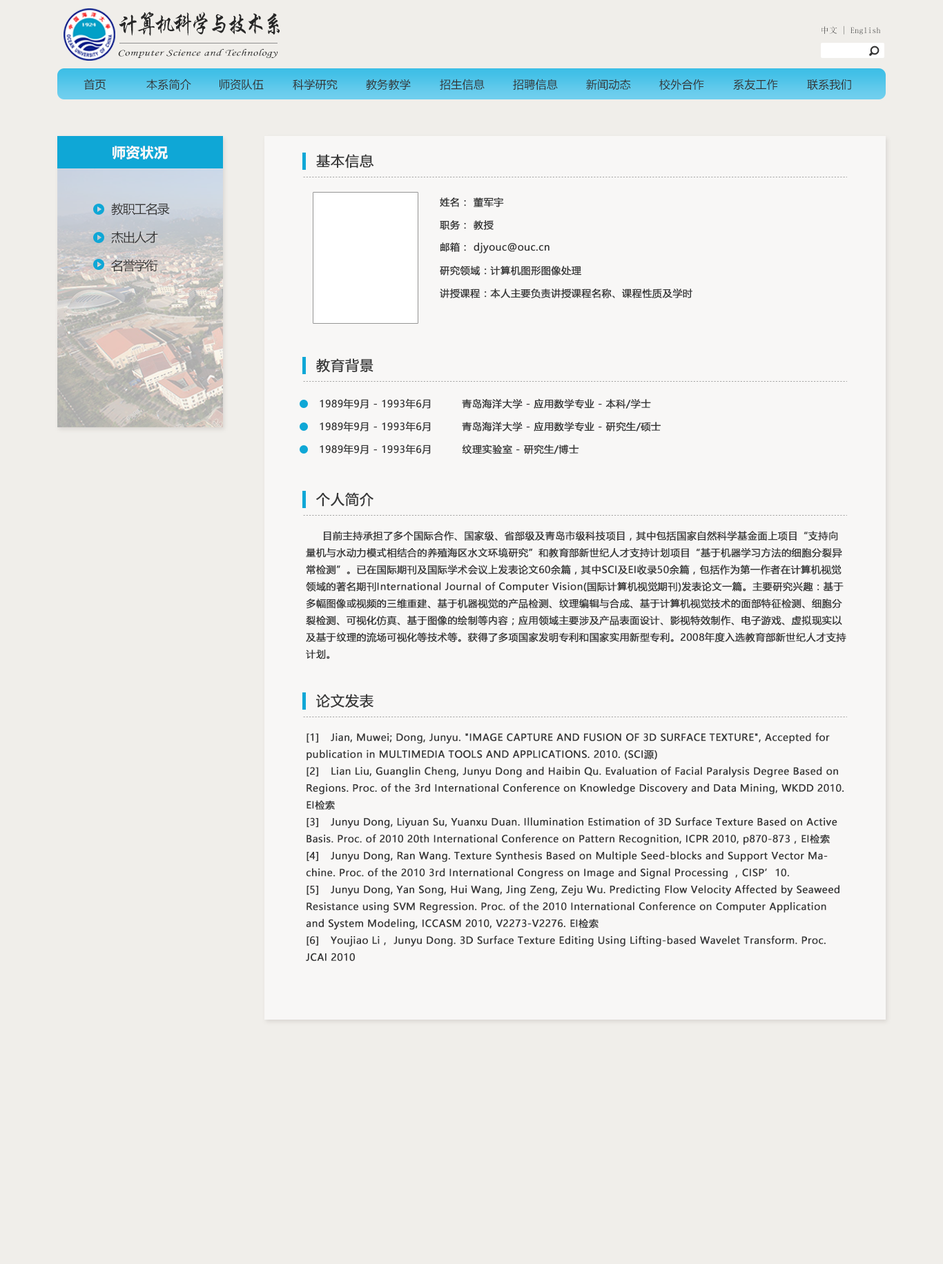
<style>
.page{position:relative;width:943px;height:1264px;background:#f0eeea}
.page>*{position:absolute;margin:0}
.t1{font:24.1px "STXingkai";letter-spacing:-0.14em;color:#272727;scale:0.88 1}
.t2{font:8.3px "SimSun";letter-spacing:0.02em}
.t3{font:9.5px "STLiti";letter-spacing:0.02em;color:#272727;scale:1.34 1}
.t4{font:11px "MicrosoftYaHei";letter-spacing:0.02em;color:#333333}
.t5{font:13.8px "MicrosoftYaHei-Bold";letter-spacing:0.02em;color:#f9f9f9}
.t6{font:13.8px "MicrosoftYaHei";letter-spacing:0.02em;color:#383838;font-weight:bold}
.t7{font:9.7px "MicrosoftYaHei";letter-spacing:0.02em;color:#383838;font-weight:bold}
.t8{font:12.4px "MicrosoftYaHei";letter-spacing:-0.076em;color:#383838}
</style>
<div class="page">
<p class="t1" style="left:119px;top:12px;width:161px;height:24px">计算机科学与技术系</p>
<p class="t2" style="left:822px;top:26px;width:59px;height:9px">中文 | English</p>
<p class="t3" style="left:118px;top:49px;width:160px;height:9px">Computer Science and Technology</p>
<p class="t4" style="left:84px;top:79px;width:22px;height:11px">首页</p>
<p class="t4" style="left:146px;top:79px;width:45px;height:11px">本系简介</p>
<p class="t4" style="left:220px;top:79px;width:44px;height:11px">师资队伍</p>
<p class="t4" style="left:293px;top:79px;width:45px;height:11px">科学研究</p>
<p class="t4" style="left:366px;top:79px;width:45px;height:11px">教务教学</p>
<p class="t4" style="left:440px;top:79px;width:45px;height:11px">招生信息</p>
<p class="t4" style="left:513px;top:79px;width:45px;height:11px">招聘信息</p>
<p class="t4" style="left:586px;top:79px;width:45px;height:11px">新闻动态</p>
<p class="t4" style="left:659px;top:79px;width:45px;height:11px">校外合作</p>
<p class="t4" style="left:733px;top:79px;width:45px;height:11px">系友工作</p>
<p class="t4" style="left:807px;top:79px;width:44px;height:11px">联系我们</p>
<p class="t5" style="left:113px;top:146px;width:55px;height:13px">师资状况</p>
<p class="t6" style="left:316px;top:154px;width:58px;height:14px">基本信息</p>
<p class="t7" style="left:440px;top:197px;width:64px;height:10px">姓名： 董军宇</p>
<p class="t8" style="left:111px;top:203px;width:59px;height:12px">教职工名录</p>
<p class="t7" style="left:440px;top:220px;width:54px;height:10px">职务： 教授</p>
<p class="t8" style="left:111px;top:231px;width:47px;height:13px">杰出人才</p>
<p class="t7" style="left:441px;top:242px;width:109px;height:11px">邮箱： djyouc@ouc.cn</p>
<p class="t8" style="left:111px;top:259px;width:47px;height:13px">名誉学衔</p>
<p class="t7" style="left:440px;top:266px;width:141px;height:9px">研究领域：计算机图形图像处理</p>
<p class="t7" style="left:440px;top:289px;width:253px;height:9px">讲授课程：本人主要负责讲授课程名称、课程性质及学时</p>
<p class="t6" style="left:316px;top:358px;width:58px;height:15px">教育背景</p>
<p class="t7" style="left:320px;top:398px;width:111px;height:11px">1989年9月 - 1993年6月</p>
<p class="t7" style="left:462px;top:398px;width:189px;height:11px">青岛海洋大学 - 应用数学专业 - 本科/学士</p>
<p class="t7" style="left:320px;top:421px;width:111px;height:11px">1989年9月 - 1993年6月</p>
<p class="t7" style="left:462px;top:421px;width:199px;height:11px">青岛海洋大学 - 应用数学专业 - 研究生/硕士</p>
<p class="t7" style="left:320px;top:444px;width:111px;height:10px">1989年9月 - 1993年6月</p>
<p class="t7" style="left:462px;top:445px;width:117px;height:9px">纹理实验室 - 研究生/博士</p>
<p class="t6" style="left:316px;top:492px;width:58px;height:15px">个人简介</p>
<p class="t7" style="left:306px;top:531px;width:541px;height:128px">目前主持承担了多个国际合作、国家级、省部级及青岛市级科技项目，其中包括国家自然科学基金面上项目“支持向量机与水动力模式相结合的养殖海区水文环境研究”和教育部新世纪人才支持计划项目“基于机器学习方法的细胞分裂异常检测”。已在国际期刊及国际学术会议上发表论文60余篇，其中SCI及EI收录50余篇，包括作为第一作者在计算机视觉领域的著名期刊International Journal of Computer Vision(国际计算机视觉期刊)发表论文一篇。主要研究兴趣：基于多幅图像或视频的三维重建、基于机器视觉的产品检测、纹理编辑与合成、基于计算机视觉技术的面部特征检测、细胞分裂检测、可视化仿真、基于图像的绘制等内容；应用领域主要涉及产品表面设计、影视特效制作、电子游戏、虚拟现实以及基于纹理的流场可视化等技术等。获得了多项国家发明专利和国家实用新型专利。2008年度入选教育部新世纪人才支持计划。</p>
<p class="t6" style="left:316px;top:694px;width:58px;height:14px">论文发表</p>
<p class="t7" style="left:306px;top:733px;width:538px;height:228px">[1] Jian, Muwei; Dong, Junyu. "IMAGE CAPTURE AND FUSION OF 3D SURFACE TEXTURE", Accepted for publication in MULTIMEDIA TOOLS AND APPLICATIONS. 2010. (SCI源)<br>[2] Lian Liu, Guanglin Cheng, Junyu Dong and Haibin Qu. Evaluation of Facial Paralysis Degree Based on Regions. Proc. of the 3rd International Conference on Knowledge Discovery and Data Mining, WKDD 2010. EI检索<br>[3] Junyu Dong, Liyuan Su, Yuanxu Duan. Illumination Estimation of 3D Surface Texture Based on Active Basis. Proc. of 2010 20th International Conference on Pattern Recognition, ICPR 2010, p870-873，EI检索<br>[4] Junyu Dong, Ran Wang. Texture Synthesis Based on Multiple Seed-blocks and Support Vector Machine. Proc. of the 2010 3rd International Congress on Image and Signal Processing ，CISP’10.<br>[5] Junyu Dong, Yan Song, Hui Wang, Jing Zeng, Zeju Wu. Predicting Flow Velocity Affected by Seaweed Resistance using SVM Regression. Proc. of the 2010 International Conference on Computer Application and System Modeling, ICCASM 2010, V2273-V2276. EI检索<br>[6] Youjiao Li， Junyu Dong. 3D Surface Texture Editing Using Lifting-based Wavelet Transform. Proc. JCAI 2010</p>
</div>
